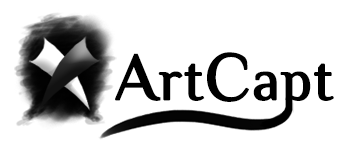
<style>
.page{position:relative;width:349px;height:150px;background:#ffffff}
.page>*{position:absolute;margin:0}
.t1{font:56.6px "Philosopher";letter-spacing:0.005em;color:#000000;font-weight:bold}
.t2{font:67.9px "Philosopher";letter-spacing:0.005em;color:#000000;font-weight:bold}
</style>
<div class="page">
<p class="t1" style="left:115px;top:52px;width:219px;height:60px"><span class="t2">A</span>rt<span class="t2">C</span>apt</p>
</div>
